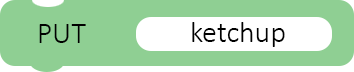
<style>
.page{position:relative;width:354px;height:72px;background:#8fcf93}
.page>*{position:absolute;margin:0}
.t1{font:30px "Calibri-Light";color:#000000}
</style>
<div class="page">
<p class="t1" style="left:39px;top:24px;width:47px;height:19px">PUT</p>
<p class="t1" style="left:192px;top:22px;width:93px;height:25px">ketchup</p>
</div>
